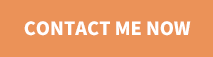
<style>
.page{position:relative;width:213px;height:57px;background:#eb9258}
.page>*{position:absolute;margin:0}
.t1{font:18px "NotoSansCJKkr-Black";color:#ffffff}
</style>
<div class="page">
<p class="t1" style="left:24px;top:21px;width:167px;height:15px">CONTACT ME NOW</p>
</div>
